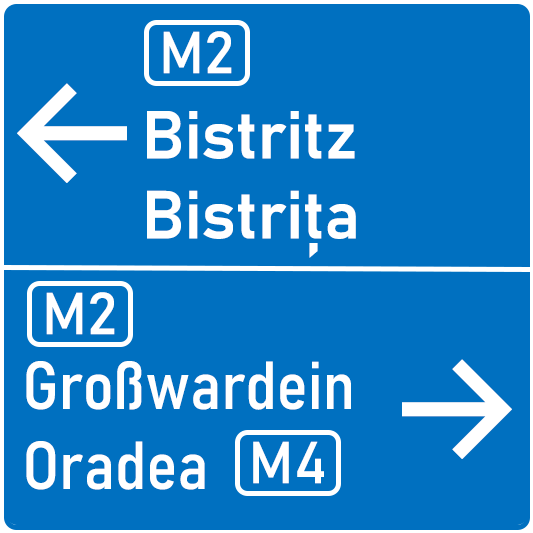
<style>
.page{position:relative;width:533px;height:533px;background:#0070c0}
.page>*{position:absolute;margin:0}
.t1{font:58.3px "Bahnschrift";color:#ffffff}
.t2{font:150px "Inter-Medium";color:#ffffff}
.t3{font:66.7px "Bahnschrift-SemiBold";color:#ffffff}
.t4{font:66.7px "Bahnschrift-SemiCondensed";color:#ffffff}
</style>
<div class="page">
<p class="t1" style="left:163px;top:31px;width:69px;height:43px">M2</p>
<p class="t2" style="left:17px;top:83px;width:110px;height:100px">←</p>
<p class="t3" style="left:147px;top:111px;width:209px;height:147px">Bistritz<br>Bistrița</p>
<p class="t1" style="left:46px;top:292px;width:69px;height:43px">M2</p>
<p class="t4" style="left:26px;top:361px;width:325px;height:129px">Großwardein<br>Oradea</p>
<p class="t2" style="left:402px;top:359px;width:110px;height:100px">→</p>
<p class="t1" style="left:253px;top:441px;width:71px;height:43px">M4</p>
</div>
